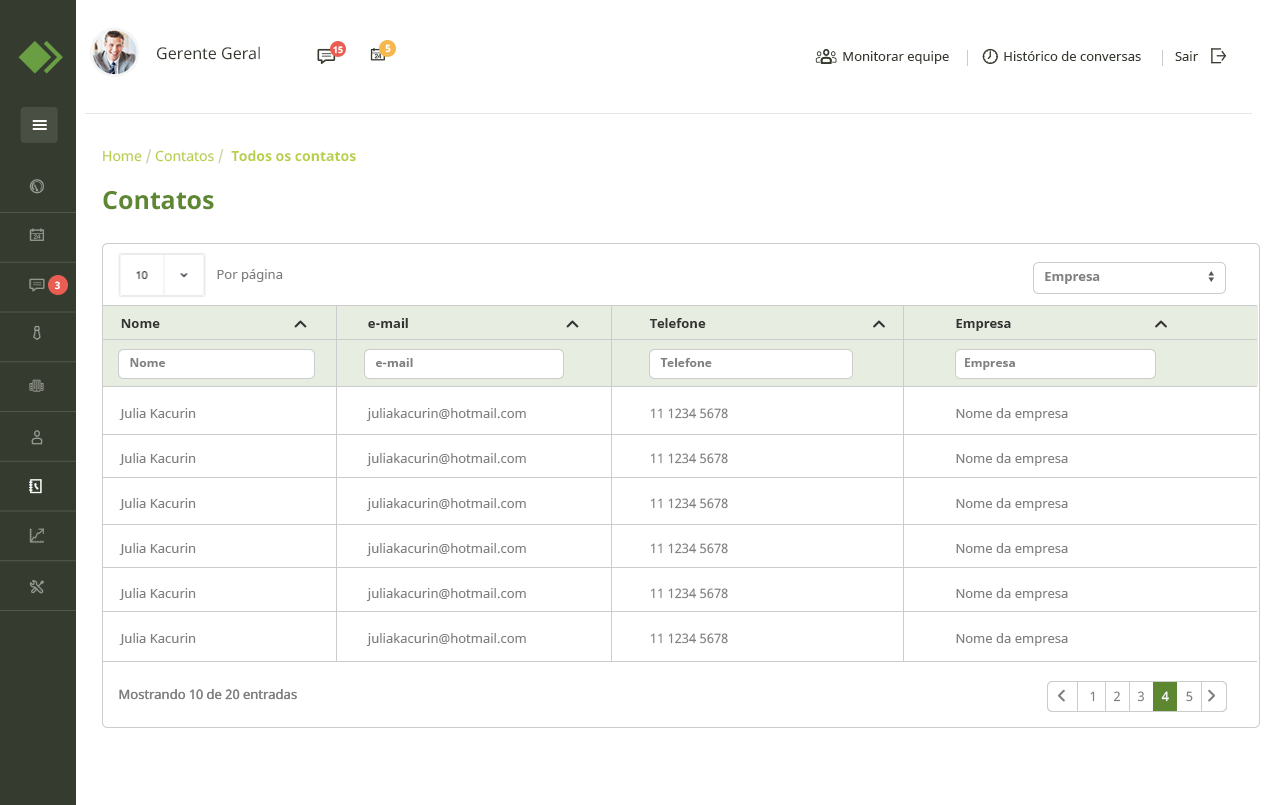
<style>
.page{position:relative;width:1280px;height:805px;background:#ffffff}
.page>*{position:absolute;margin:0}
.t1{font:16px "NotoSans";color:#353b2f}
.t2{font:9px "NotoSans-Bold";color:#ffffff}
.t3{font:10px "NotoSans-Bold";color:#ffffff}
.t4{font:13px "NotoSans";color:#353b2f}
.t5{font:14px "NotoSans-Bold";color:#b8cf49}
.t6{font:14px "NotoSans";color:#b8cf49}
.t7{font:14px "NotoSans";color:#c7cfa1}
.t8{font:25px "NotoSans-Bold";color:#5d8730}
.t9{font:13px "NotoSans";color:#808080}
.t10{font:13px "NotoSans-Bold";color:#808080}
.t11{font:13px/45px "NotoSans";color:#808080}
.t12{font:13px/45px "NotoSans-Bold";color:#333333}
.t13{font:12px "NotoSans-Bold";color:#808080}
</style>
<div class="page">
<p class="t1" style="left:157px;top:46px;width:103px;height:14px">Gerente Geral</p>
<p class="t2" style="left:333px;top:46px;width:10px;height:8px">15</p>
<p class="t3" style="left:385px;top:44px;width:6px;height:9px">5</p>
<p class="t4" style="left:843px;top:51px;width:355px;height:13px">Monitorar equipe                Histórico de conversas          Sair</p>
<p class="t5" style="left:103px;top:149px;width:253px;height:15px"><span class="t6">Home </span><span class="t7">/</span><span class="t6"> Contatos </span><span class="t7">/  </span>Todos os contatos</p>
<p class="t8" style="left:103px;top:191px;width:111px;height:19px">Contatos</p>
<p class="t9" style="left:217px;top:269px;width:66px;height:13px">Por página</p>
<p class="t3" style="left:55px;top:281px;width:5px;height:9px">3</p>
<p class="t10" style="left:1045px;top:272px;width:55px;height:12px">Empresa</p>
<p class="t11" style="left:366px;top:318px;width:160px;height:328px"><span class="t12">e-mail<br></span><br>juliakacurin@hotmail.com<br>juliakacurin@hotmail.com<br>juliakacurin@hotmail.com<br>juliakacurin@hotmail.com<br>juliakacurin@hotmail.com<br>juliakacurin@hotmail.com</p>
<p class="t11" style="left:649px;top:318px;width:79px;height:326px"><span class="t12">Telefone<br><br></span>11 1234 5678<br>11 1234 5678<br>11 1234 5678<br>11 1234 5678<br>11 1234 5678<br>11 1234 5678</p>
<p class="t11" style="left:119px;top:319px;width:77px;height:326px"><span class="t12">Nome<br></span><br>Julia Kacurin<br>Julia Kacurin<br>Julia Kacurin<br>Julia Kacurin<br>Julia Kacurin<br>Julia Kacurin</p>
<p class="t11" style="left:956px;top:319px;width:112px;height:327px"><span class="t12">Empresa<br><br></span>Nome da empresa<br>Nome da empresa<br>Nome da empresa<br>Nome da empresa<br>Nome da empresa<br>Nome da empresa</p>
<p class="t13" style="left:130px;top:358px;width:36px;height:9px">Nome</p>
<p class="t13" style="left:376px;top:358px;width:37px;height:9px">e-mail</p>
<p class="t13" style="left:660px;top:358px;width:52px;height:9px">Telefone</p>
<p class="t13" style="left:965px;top:358px;width:50px;height:12px">Empresa</p>
<p class="t9" style="left:119px;top:688px;width:178px;height:12px">Mostrando 10 de 20 entradas</p>
<p class="t9" style="left:119px;top:689px;width:178px;height:11px">Mostrando 10 de 20 entradas</p>
</div>
